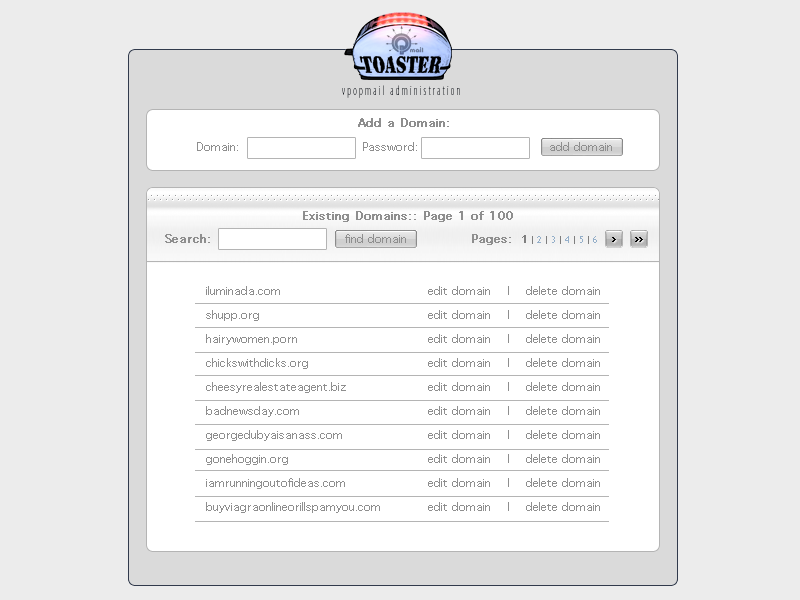
<style>
.page{position:relative;width:800px;height:600px;background:#ececec}
.page>*{position:absolute;margin:0}
.t1{font:14px "MyriadPro-LightCond";letter-spacing:0.2em;color:#0f1218;scale:0.75 1}
.t2{font:11px "Geneva";color:#8e8e8e;font-weight:bold}
.t3{font:11px "Geneva";color:#8e8e8e}
.t4{font:11px/24px "Geneva";color:#8e8e8e}
</style>
<div class="page">
<p class="t1" style="left:342px;top:85px;width:118px;height:13px">vpopmail administration</p>
<p class="t2" style="left:358px;top:118px;width:91px;height:9px">Add a Domain:</p>
<p class="t3" style="left:197px;top:142px;width:41px;height:9px">Domain:</p>
<p class="t3" style="left:363px;top:142px;width:54px;height:9px">Password:</p>
<p class="t3" style="left:550px;top:142px;width:62px;height:9px">add domain</p>
<p class="t2" style="left:303px;top:211px;width:210px;height:11px">Existing Domains:: Page 1 of 100</p>
<p class="t2" style="left:165px;top:234px;width:45px;height:9px">Search:</p>
<p class="t3" style="left:345px;top:234px;width:61px;height:9px">find domain</p>
<p class="t2" style="left:472px;top:234px;width:39px;height:11px">Pages:</p>
<p class="t4" style="left:206px;top:286px;width:174px;height:227px">iluminada.com<br>shupp.org<br>hairywomen.porn<br>chickswithdicks.org<br>cheesyrealestateagent.biz<br>badnewsday.com<br>georgedubyaisanass.com<br>gonehoggin.org<br>iamrunningoutofideas.com<br>buyviagraonlineorillspamyou.com</p>
<p class="t4" style="left:428px;top:286px;width:172px;height:225px">edit domain    |    delete domain<br>edit domain    |    delete domain<br>edit domain    |    delete domain<br>edit domain    |    delete domain<br>edit domain    |    delete domain<br>edit domain    |    delete domain<br>edit domain    |    delete domain<br>edit domain    |    delete domain<br>edit domain    |    delete domain<br>edit domain    |    delete domain</p>
</div>
